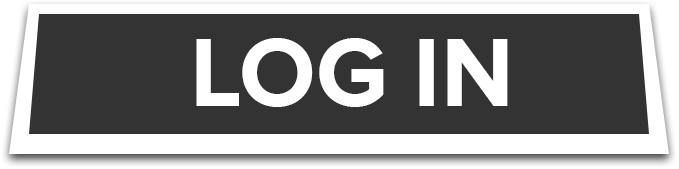
<style>
.page{position:relative;width:679px;height:169px;background:#333333}
.page>*{position:absolute;margin:0}
.t1{font:100px "ProximaNova-Bold";color:#ffffff;text-transform:uppercase}
</style>
<div class="page">
<p class="t1" style="left:196px;top:38px;width:312px;height:69px">Log in</p>
</div>
